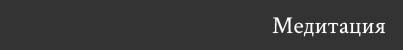
<style>
.page{position:relative;width:403px;height:50px;background:#333333}
.page>*{position:absolute;margin:0}
.t1{font:24px "CrimsonText-Regular";color:#ffffff}
</style>
<div class="page">
<p class="t1" style="left:272px;top:17px;width:114px;height:20px">Медитация</p>
</div>
